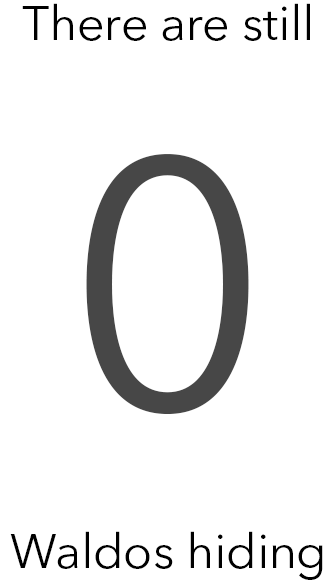
<style>
.page{position:relative;width:336px;height:583px;background:#ffffff}
.page>*{position:absolute;margin:0}
.t1{font:48px/48px "AvenirNextLTPro-Regular";color:#000000}
.t2{font:350px "AvenirNextLTPro-Regular";letter-spacing:-0.05em;color:#474747}
</style>
<div class="page">
<p class="t1" style="left:10px;top:3px;width:313px;height:577px;text-align:center">There are still<br><br><br><br><br><br><br><br><br><br><br>Waldos hiding</p>
<p class="t2" style="left:86px;top:154px;width:163px;height:260px">0</p>
</div>
